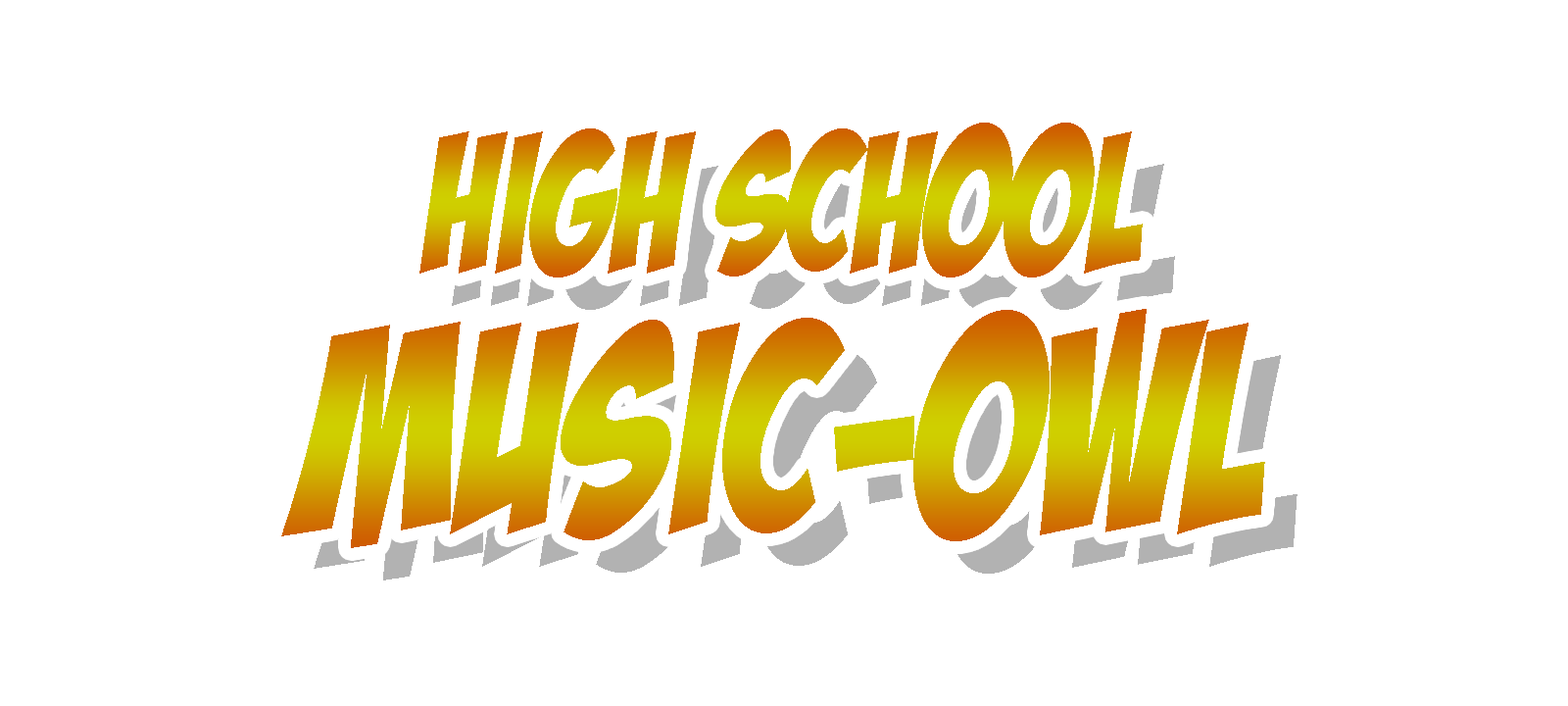
<style>
.page{position:relative;width:1568px;height:706px;background:#ffffff}
.page>*{position:absolute;margin:0}
.t1{font:196px "BadaBoomBB";scale:0.85 1}
.t2{font:294px "BadaBoomBB";scale:0.85 1}
</style>
<div class="page">
<p class="t1" style="left:419px;top:122px;width:724px;height:155px">High School</p>
<p class="t2" style="left:281px;top:309px;width:984px;height:239px">Music-OWL</p>
</div>
